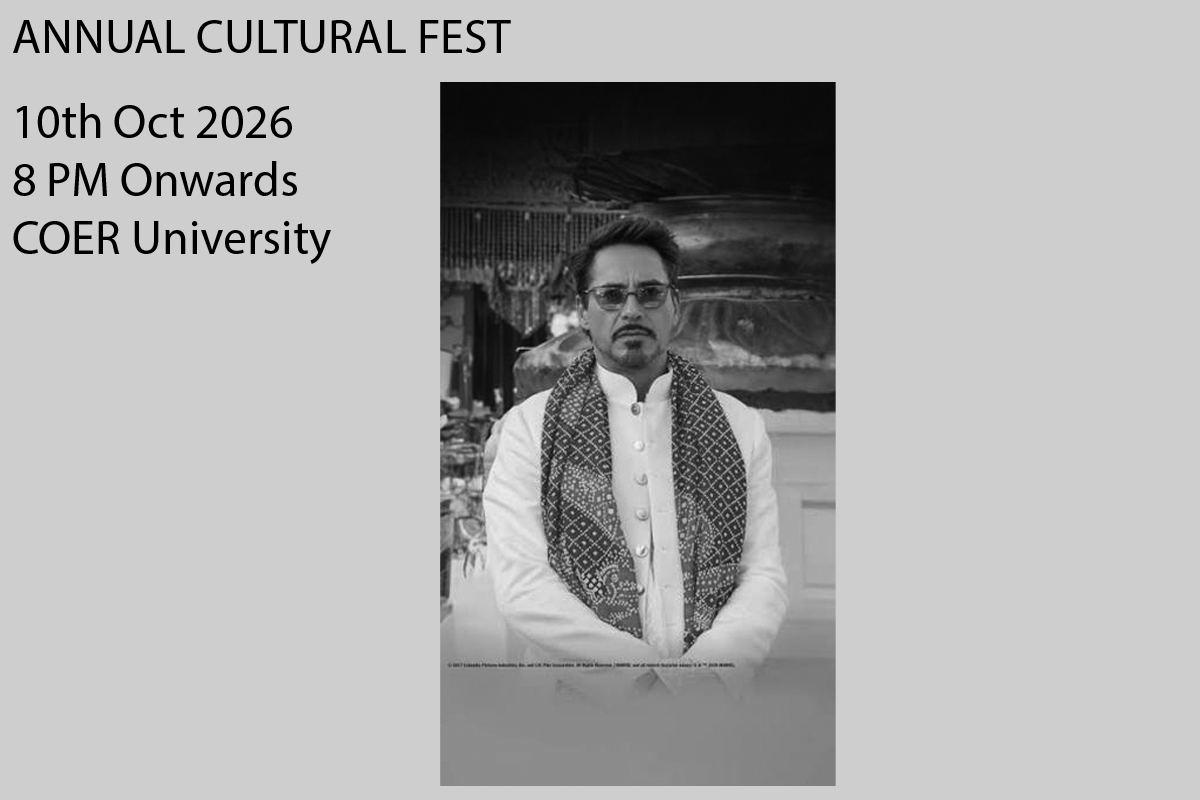
<style>
.page{position:relative;width:1200px;height:800px;background:#cecece}
.page>*{position:absolute;margin:0}
.t1{font:48px "MyriadPro-Regular";color:#000000}
</style>
<div class="page">
<p class="t1" style="left:13px;top:20px;width:498px;height:33px">ANNUAL CULTURAL FEST</p>
<p class="t1" style="left:13px;top:103px;width:318px;height:161px">10th Oct 2026<br>8 PM Onwards<br>COER University</p>
</div>
